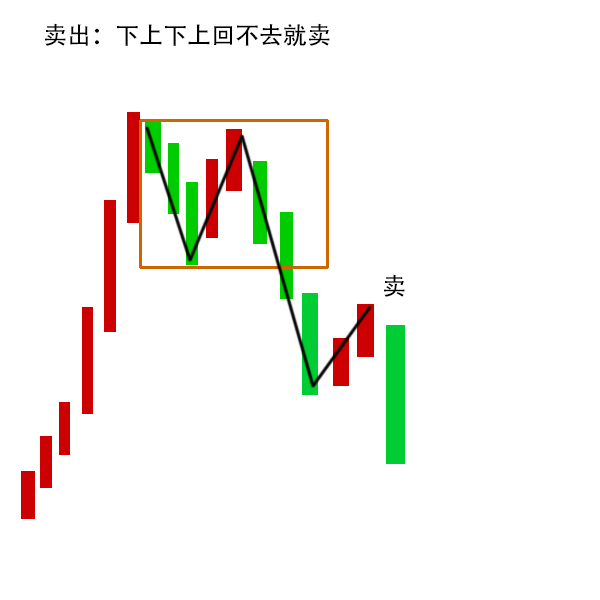
<style>
.page{position:relative;width:600px;height:600px;background:#ffffff}
.page>*{position:absolute;margin:0}
.t1{font:24px "AdobeHeitiStd-Regular";color:#000000;text-transform:uppercase}
</style>
<div class="page">
<p class="t1" style="left:45px;top:23px;width:285px;height:24px">卖出：下上下上回不去就卖</p>
<p class="t1" style="left:384px;top:274px;width:21px;height:23px">卖</p>
</div>
